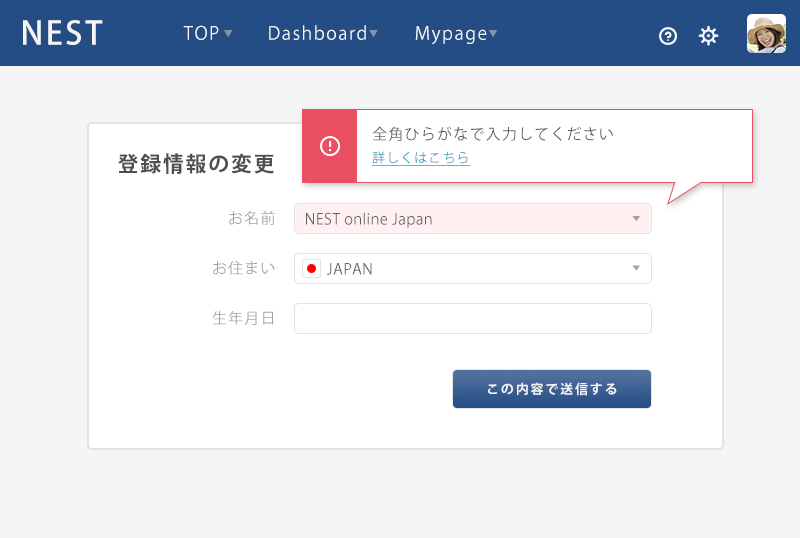
<style>
.page{position:relative;width:800px;height:538px;background:#ffffff}
.page>*{position:absolute;margin:0}
.t1{font:32px "KozGoPr6N-Medium";letter-spacing:0.08em;color:#f5f5f5}
.t2{font:18px "KozGoPr6N-Regular";letter-spacing:0.08em;color:#f5f5f5}
.t3{font:9px "KozGoPr6N-Regular";letter-spacing:0.08em;color:#8493a8}
.t4{font:15px/23px "KozGoPr6N-Regular";letter-spacing:0.08em;color:#5a5a5a}
.t5{font:13px/23px "KozGoPr6N-Regular";letter-spacing:0.08em;color:#298eb4;text-decoration:underline}
.t6{font:21px "KozGoPr6N-Bold";letter-spacing:0.08em;color:#4f4f4f}
.t7{font:15px/50px "KozGoPr6N-Regular";letter-spacing:0.08em;color:#a1a1a1}
.t8{font:15px "KozGoPr6N-Regular";letter-spacing:0.02em;color:#626060}
.t9{font:6.4px/49.6px "KozGoPr6N-Regular";letter-spacing:0.08em;color:#a1a1a1;scale:1.35 1}
.t10{font:13px "KozGoPr6N-Bold";letter-spacing:0.14em;color:#f5f5f5}
</style>
<div class="page">
<p class="t1" style="left:23px;top:20px;width:80px;height:25px">NEST</p>
<p class="t2" style="left:183px;top:25px;width:50px;height:15px">TOP<span class="t3">▼</span></p>
<p class="t2" style="left:269px;top:25px;width:109px;height:15px">Dashboard<span class="t3">▼</span></p>
<p class="t2" style="left:415px;top:26px;width:83px;height:19px">Mypage<span class="t3">▼</span></p>
<p class="t4" style="left:372px;top:126px;width:241px;height:40px">全角ひらがなで入力してください<br><span class="t5">詳しくはこちら</span></p>
<p class="t6" style="left:118px;top:153px;width:156px;height:21px">登録情報の変更</p>
<p class="t7" style="left:212px;top:210px;width:63px;height:115px;text-align:right">お名前<br>お住まい<br>生年月日</p>
<p class="t8" style="left:306px;top:212px;width:126px;height:16px">NEST online Japan</p>
<p class="t9" style="left:632px;top:216px;width:9px;height:55px;text-align:right">▼<br>▼</p>
<p class="t8" style="left:326px;top:263px;width:46px;height:12px">JAPAN</p>
<p class="t10" style="left:488px;top:382px;width:129px;height:14px">この内容で送信する</p>
</div>
